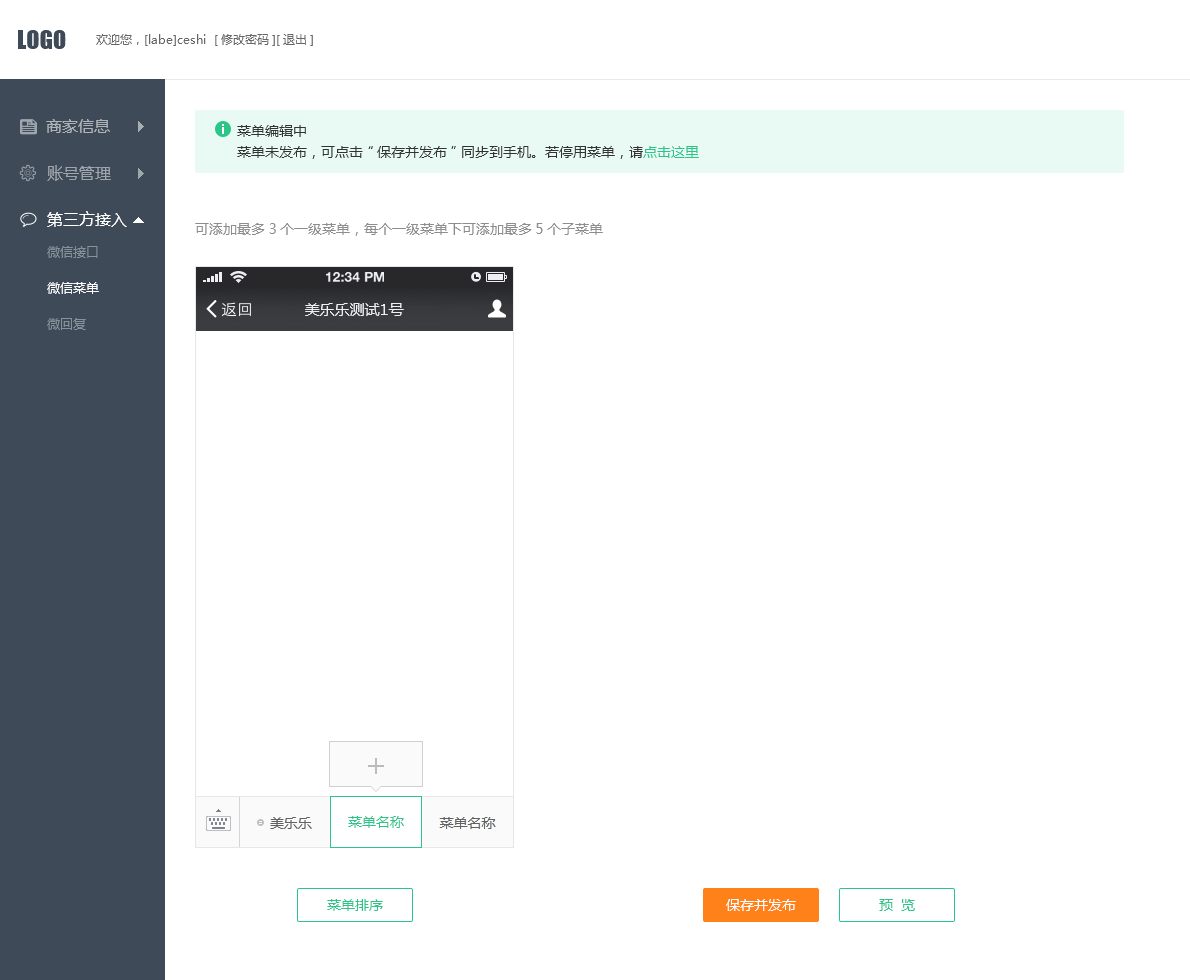
<style>
.page{position:relative;width:1190px;height:980px;background:#ffffff}
.page>*{position:absolute;margin:0}
.t1{font:24px "Impact";color:#3f4a59}
.t2{font:12px "MicrosoftYaHei";color:#666666}
.t3{font:16px "MicrosoftYaHei";color:#b0b4b8}
.t4{font:14px/21px "MicrosoftYaHei";color:#333333}
.t5{font:14px/21px "MicrosoftYaHei";color:#2bc589}
.t6{font:16px "MicrosoftYaHei";color:#9fa5ac}
.t7{font:16px "MicrosoftYaHei";color:#ffffff}
.t8{font:14px "MicrosoftYaHei";color:#8d8d8d}
.t9{font:13px/18px "MicrosoftYaHei";color:#87929a}
.t10{font:13px/18px "MicrosoftYaHei";color:#ffffff}
.t11{font:13.7px "HelveticaNeue-Bold";color:#eceef1;text-transform:uppercase}
.t12{font:15px "MicrosoftYaHei";color:#eceef1;text-transform:uppercase}
.t13{font:14px "MicrosoftYaHei";color:#2bc589}
.t14{font:14px "MicrosoftYaHei";color:#ffffff}
</style>
<div class="page">
<p class="t1" style="left:18px;top:30px;width:48px;height:19px">LOGO</p>
<p class="t2" style="left:96px;top:34px;width:217px;height:12px">欢迎您，[labe]ceshi  [修改密码][退出]</p>
<p class="t3" style="left:46px;top:119px;width:64px;height:14px">商家信息</p>
<p class="t4" style="left:237px;top:125px;width:462px;height:34px">菜单编辑中<br>菜单未发布，可点击“保存并发布”同步到手机。若停用菜单，请<span class="t5">点击这里</span></p>
<p class="t6" style="left:47px;top:165px;width:64px;height:16px">账号管理</p>
<p class="t7" style="left:47px;top:211px;width:80px;height:16px">第三方接入</p>
<p class="t8" style="left:195px;top:223px;width:408px;height:13px">可添加最多3个一级菜单，每个一级菜单下可添加最多5个子菜单</p>
<p class="t9" style="left:47px;top:246px;width:52px;height:84px">微信接口<br><br><span class="t10">微信菜单<br></span><br>微回复</p>
<p class="t11" style="left:326px;top:272px;width:58px;height:10px">12:34 PM</p>
<p class="t12" style="left:305px;top:303px;width:99px;height:13px">美乐乐测试1号</p>
<p class="t13" style="left:348px;top:816px;width:56px;height:12px">菜单名称</p>
<p class="t13" style="left:327px;top:899px;width:56px;height:12px">菜单排序</p>
<p class="t14" style="left:726px;top:899px;width:70px;height:12px">保存并发布</p>
<p class="t13" style="left:879px;top:899px;width:36px;height:12px">预  览</p>
</div>
